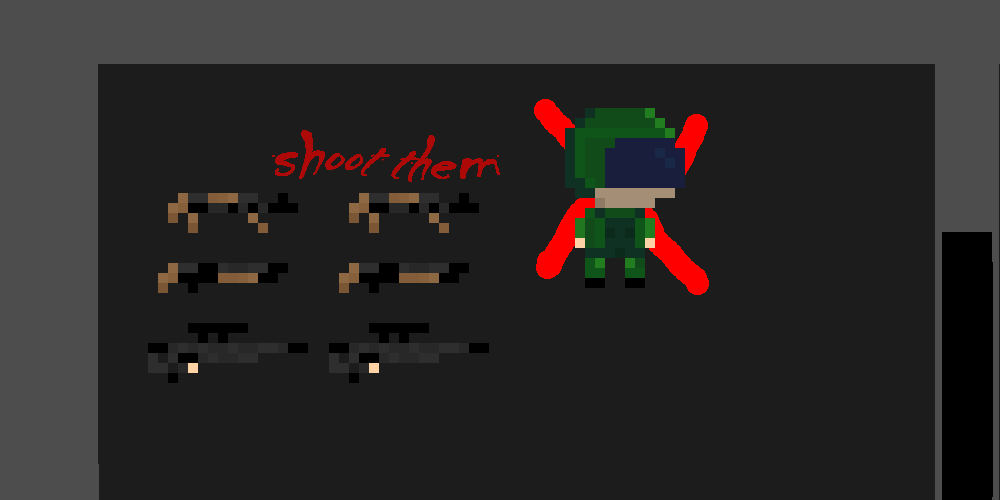
<style>
.page{position:relative;width:1000px;height:500px;background:#1c1c1c}
.page>*{position:absolute;margin:0}
.t1{font:72px "Chiller-Regular";color:#ad0909}
</style>
<div class="page">
<p class="t1" style="left:272px;top:130px;width:228px;height:52px">shoot them</p>
</div>
